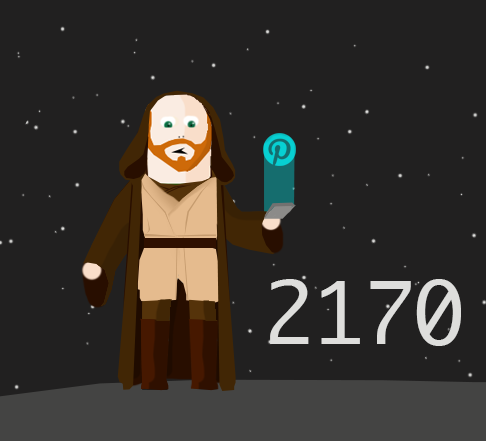
<style>
.page{position:relative;width:486px;height:441px;background:#212020}
.page>*{position:absolute;margin:0}
.t1{font:83.3px "Ayuthaya";color:#dededc}
</style>
<div class="page">
<p class="t1" style="left:270px;top:279px;width:191px;height:67px">2170</p>
</div>
